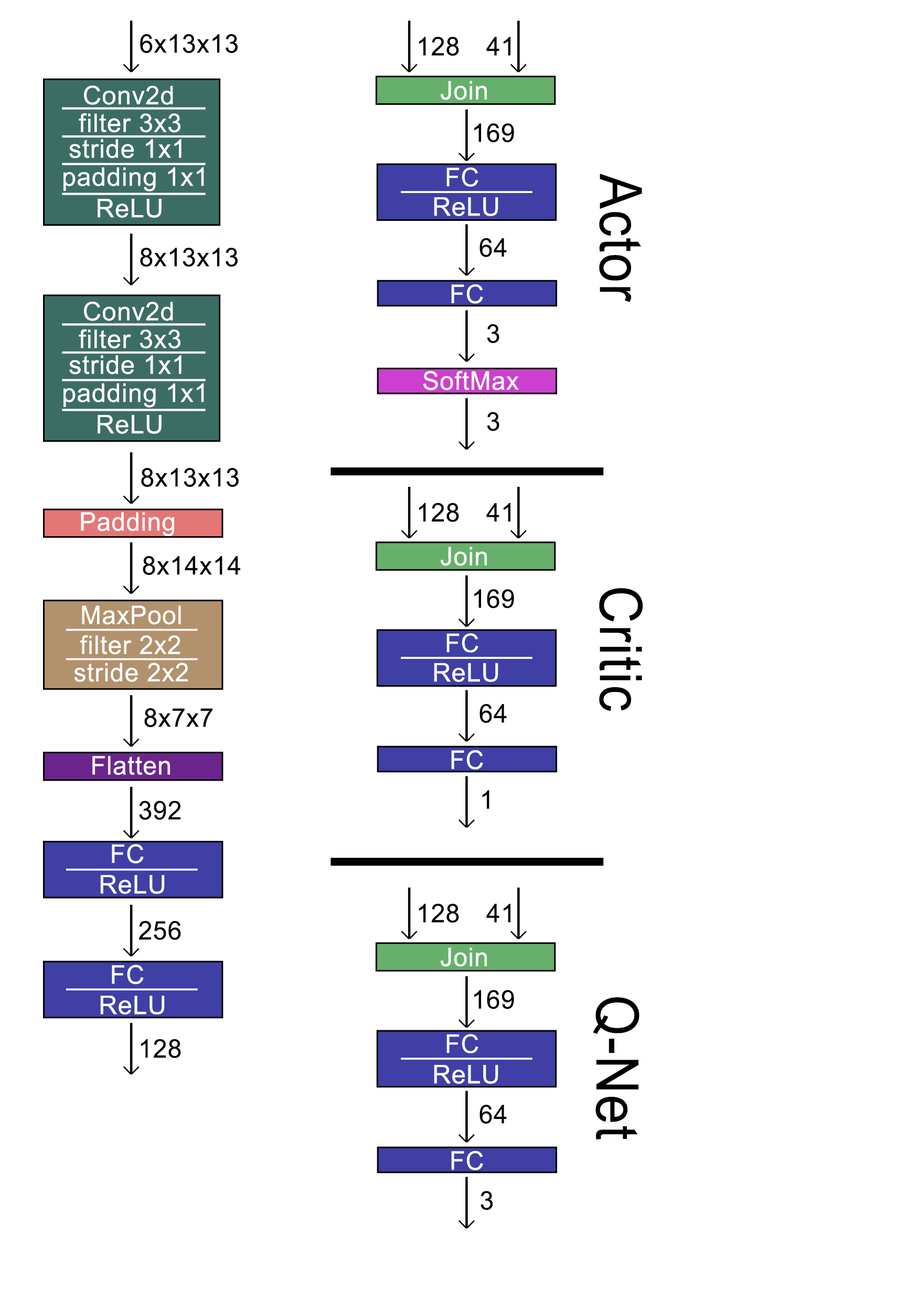
<style>
.page{position:relative;width:917px;height:1301px;background:#ffffff}
.page>*{position:absolute;margin:0}
.t1{font:25.7px "ArialMT";letter-spacing:0.025em;color:#000000}
.t2{font:25.7px "ArialMT";letter-spacing:0.025em;color:#ffffff}
.t3{font:58.7px "ArialMT";letter-spacing:0.025em;color:#000000;scale:0.89 1}
</style>
<div class="page">
<p class="t1" style="left:140px;top:34px;width:98px;height:19px">6x13x13</p>
<p class="t1" style="left:419px;top:37px;width:40px;height:19px">128</p>
<p class="t1" style="left:486px;top:37px;width:24px;height:19px">41</p>
<p class="t2" style="left:84px;top:85px;width:89px;height:20px">Conv2d</p>
<p class="t2" style="left:79px;top:113px;width:101px;height:20px">filter 3x3</p>
<p class="t1" style="left:474px;top:123px;width:40px;height:20px">169</p>
<p class="t2" style="left:69px;top:139px;width:112px;height:19px">stride 1x1</p>
<p class="t2" style="left:63px;top:167px;width:141px;height:24px">padding 1x1</p>
<p class="t3" style="left:599px;top:174px;width:43px;height:128px;rotate:90deg">Actor</p>
<p class="t2" style="left:98px;top:199px;width:64px;height:19px">ReLU</p>
<p class="t1" style="left:479px;top:238px;width:28px;height:19px">64</p>
<p class="t1" style="left:140px;top:248px;width:98px;height:19px">8x13x13</p>
<p class="t2" style="left:84px;top:302px;width:89px;height:19px">Conv2d</p>
<p class="t2" style="left:79px;top:329px;width:101px;height:20px">filter 3x3</p>
<p class="t1" style="left:487px;top:324px;width:12px;height:19px">3</p>
<p class="t2" style="left:69px;top:355px;width:112px;height:19px">stride 1x1</p>
<p class="t2" style="left:423px;top:371px;width:96px;height:19px">SoftMax</p>
<p class="t2" style="left:63px;top:383px;width:141px;height:25px">padding 1x1</p>
<p class="t1" style="left:487px;top:412px;width:12px;height:19px">3</p>
<p class="t2" style="left:98px;top:415px;width:64px;height:19px">ReLU</p>
<p class="t1" style="left:141px;top:468px;width:98px;height:19px">8x13x13</p>
<p class="t1" style="left:419px;top:502px;width:40px;height:20px">128</p>
<p class="t1" style="left:486px;top:502px;width:24px;height:20px">41</p>
<p class="t1" style="left:143px;top:556px;width:97px;height:19px">8x14x14</p>
<p class="t1" style="left:474px;top:589px;width:40px;height:19px">169</p>
<p class="t3" style="left:599px;top:588px;width:44px;height:123px;rotate:90deg">Critic</p>
<p class="t1" style="left:144px;top:708px;width:68px;height:19px">8x7x7</p>
<p class="t1" style="left:479px;top:704px;width:28px;height:19px">64</p>
<p class="t1" style="left:482px;top:790px;width:7px;height:19px">1</p>
<p class="t1" style="left:139px;top:800px;width:41px;height:20px">392</p>
<p class="t1" style="left:419px;top:903px;width:40px;height:20px">128</p>
<p class="t1" style="left:486px;top:903px;width:24px;height:20px">41</p>
<p class="t1" style="left:138px;top:920px;width:43px;height:20px">256</p>
<p class="t1" style="left:474px;top:990px;width:40px;height:19px">169</p>
<p class="t3" style="left:593px;top:997px;width:46px;height:143px;rotate:90deg">Q-Net</p>
<p class="t1" style="left:141px;top:1038px;width:40px;height:20px">128</p>
<p class="t1" style="left:479px;top:1104px;width:28px;height:19px">64</p>
<p class="t1" style="left:480px;top:1191px;width:13px;height:19px">3</p>
</div>
